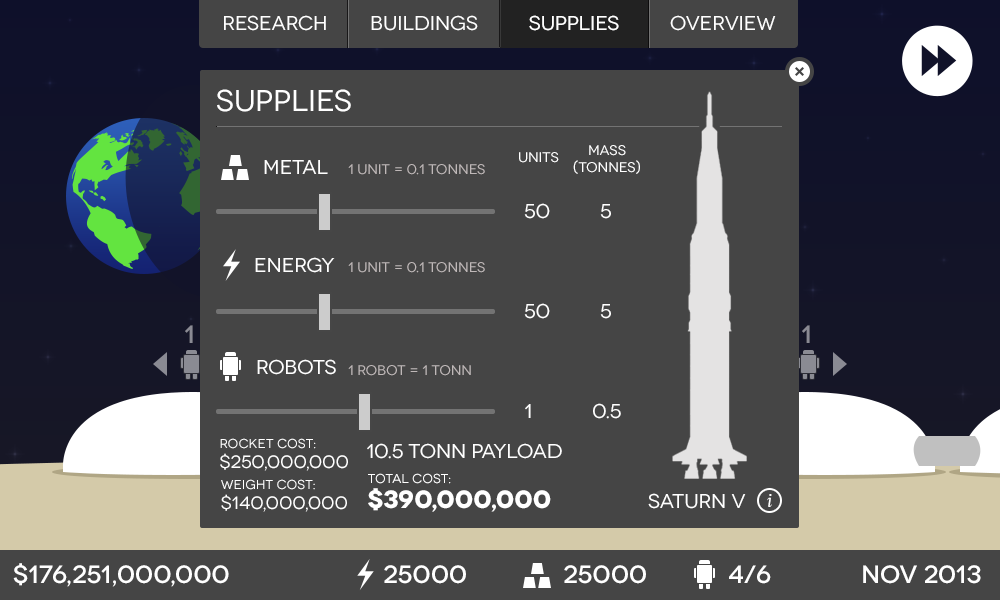
<style>
.page{position:relative;width:1000px;height:600px;background:#454545}
.page>*{position:absolute;margin:0}
.t1{font:20px "Novecentowide-Normal";color:#ffffff}
.t2{font:30px "Novecentowide-Normal";color:#ffffff}
.t3{font:14px "Novecentowide-Normal";color:#ffffff}
.t4{font:14px "Novecentowide-Normal";color:#bfb8b8}
.t5{font:25px "Novecentowide-Medium";color:#8a8a93}
.t6{font:13px "Novecentowide-Normal";color:#ffffff}
.t7{font:18px "Novecentowide-Normal";color:#ffffff}
.t8{font:25px "Novecentowide-Bold";color:#ffffff}
.t9{font:18px "Contra-Italic";color:#ffffff}
.t10{font:25px "Novecentowide-Medium";color:#ffffff}
</style>
<div class="page">
<p class="t1" style="left:224px;top:15px;width:102px;height:16px">Research</p>
<p class="t1" style="left:371px;top:15px;width:107px;height:16px">Buildings</p>
<p class="t1" style="left:529px;top:15px;width:90px;height:16px">supplies</p>
<p class="t1" style="left:529px;top:15px;width:90px;height:16px">Supplies</p>
<p class="t1" style="left:670px;top:15px;width:106px;height:16px">overview</p>
<p class="t2" style="left:217px;top:89px;width:134px;height:23px">Supplies</p>
<p class="t3" style="left:573px;top:145px;width:67px;height:29px;text-align:center">Mass<br>(tonnes)</p>
<p class="t1" style="left:264px;top:160px;width:64px;height:14px">MEtal</p>
<p class="t3" style="left:519px;top:152px;width:40px;height:11px">Units</p>
<p class="t4" style="left:348px;top:164px;width:137px;height:11px">1 unit = 0.1 Tonnes</p>
<p class="t1" style="left:524px;top:203px;width:87px;height:16px">50          5</p>
<p class="t1" style="left:255px;top:257px;width:80px;height:16px">Energy</p>
<p class="t4" style="left:348px;top:262px;width:137px;height:11px">1 unit = 0.1 Tonnes</p>
<p class="t1" style="left:524px;top:303px;width:87px;height:16px">50          5</p>
<p class="t5" style="left:185px;top:325px;width:8px;height:18px">1</p>
<p class="t5" style="left:802px;top:325px;width:8px;height:18px">1</p>
<p class="t1" style="left:257px;top:359px;width:79px;height:16px">Robots</p>
<p class="t4" style="left:348px;top:365px;width:123px;height:11px">1 robot = 1 Tonn</p>
<p class="t1" style="left:525px;top:403px;width:96px;height:16px">1            0.5</p>
<p class="t6" style="left:220px;top:438px;width:96px;height:11px">Rocket Cost:</p>
<p class="t1" style="left:367px;top:443px;width:195px;height:16px">10.5 Tonn Payload</p>
<p class="t7" style="left:220px;top:453px;width:128px;height:18px">$250,000,000</p>
<p class="t6" style="left:368px;top:473px;width:83px;height:11px">TOTAL COST:</p>
<p class="t6" style="left:221px;top:479px;width:94px;height:11px">Weight Cost:</p>
<p class="t7" style="left:221px;top:494px;width:126px;height:18px">$140,000,000</p>
<p class="t8" style="left:368px;top:488px;width:183px;height:24px">$390,000,000</p>
<p class="t1" style="left:648px;top:493px;width:98px;height:16px">Saturn v</p>
<p class="t9" style="left:767px;top:494px;width:5px;height:13px">i</p>
<p class="t10" style="left:13px;top:563px;width:216px;height:24px">$176,251,000,000</p>
<p class="t10" style="left:384px;top:565px;width:82px;height:19px">25000</p>
<p class="t10" style="left:564px;top:565px;width:82px;height:19px">25000</p>
<p class="t10" style="left:729px;top:565px;width:42px;height:19px">4/6</p>
<p class="t10" style="left:863px;top:565px;width:118px;height:19px">Nov 2013</p>
</div>
